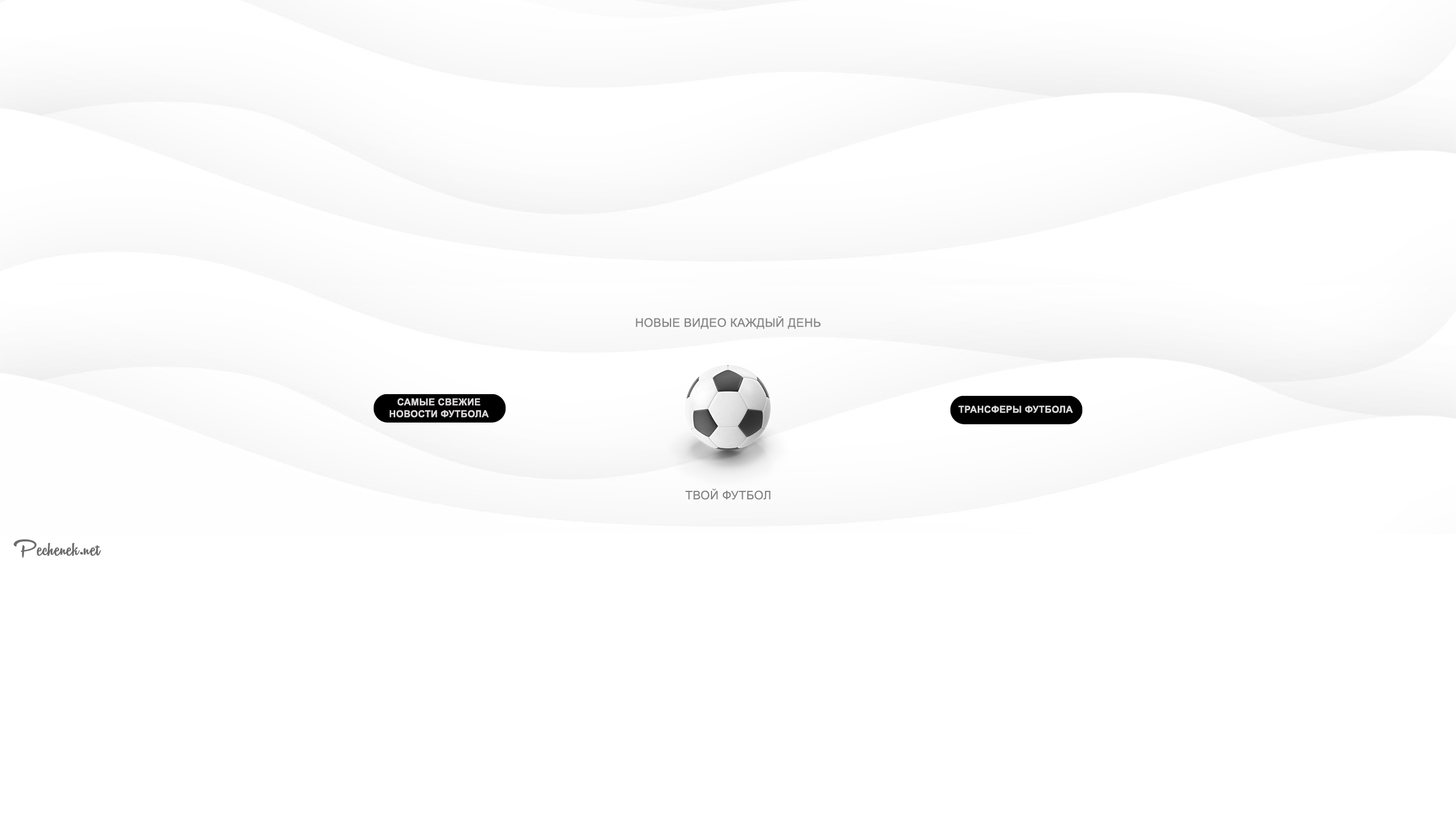
<style>
.page{position:relative;width:1456px;height:819px;background:#ffffff}
.page>*{position:absolute;margin:0}
.t1{font:11.8px "ArialMT";letter-spacing:0.02em;color:#858282}
.t2{font:9.5px/11.8px "Arial-BoldMT";letter-spacing:0.02em;color:#dad7d7}
.t3{font:9.5px "Arial-BoldMT";letter-spacing:0.02em;color:#dad7d7}
.t4{font:26.1px "Vantom";color:#6c6c6c}
</style>
<div class="page">
<p class="t1" style="left:636px;top:316px;width:185px;height:13px">НОВЫЕ ВИДЕО КАЖДЫЙ ДЕНЬ</p>
<p class="t2" style="left:390px;top:398px;width:99px;height:19px;text-align:justify">САМЫЕ СВЕЖИЕ<br>НОВОСТИ ФУТБОЛА</p>
<p class="t3" style="left:958px;top:406px;width:115px;height:7px">ТРАНСФЕРЫ ФУТБОЛА</p>
<p class="t1" style="left:685px;top:489px;width:86px;height:11px">ТВОЙ ФУТБОЛ</p>
<p class="t4" style="left:14px;top:539px;width:87px;height:19px">Pechenek.net</p>
</div>
